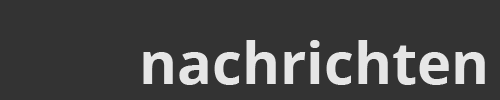
<style>
.page{position:relative;width:500px;height:100px;background:#333333}
.page>*{position:absolute;margin:0}
.t1{font:58px "OpenSans-Bold";color:#e6e6e6}
</style>
<div class="page">
<p class="t1" style="left:143px;top:40px;width:342px;height:45px">nachrichten</p>
</div>
